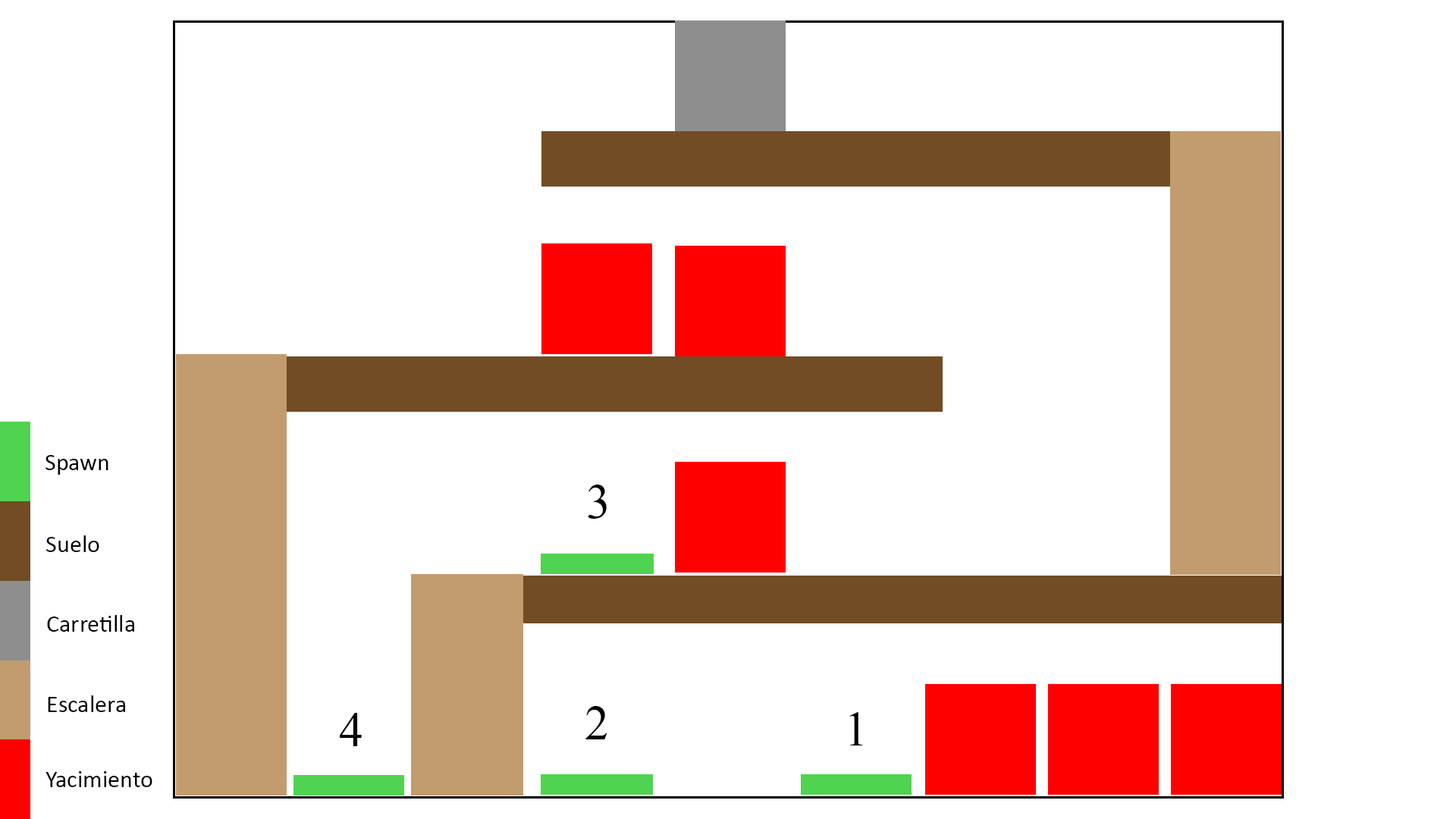
<style>
.page{position:relative;width:1456px;height:819px;background:#ffffff}
.page>*{position:absolute;margin:0}
.t1{font:24.3px "Calibri";color:#000000}
.t2{font:48.5px "TimesNewRomanPSMT";color:#000000}
</style>
<div class="page">
<p class="t1" style="left:45px;top:455px;width:63px;height:20px">Spawn</p>
<p class="t2" style="left:588px;top:485px;width:19px;height:34px">3</p>
<p class="t1" style="left:46px;top:535px;width:53px;height:17px">Suelo</p>
<p class="t1" style="left:47px;top:615px;width:87px;height:17px">Carretilla</p>
<p class="t1" style="left:48px;top:695px;width:77px;height:17px">Escalera</p>
<p class="t2" style="left:340px;top:713px;width:22px;height:33px">4</p>
<p class="t2" style="left:585px;top:706px;width:22px;height:33px">2</p>
<p class="t2" style="left:849px;top:712px;width:14px;height:33px">1</p>
<p class="t1" style="left:45px;top:771px;width:107px;height:16px">Yacimiento</p>
</div>
